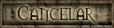
<style>
.page{position:relative;width:114px;height:28px}
.page>*{position:absolute;margin:0}
.t1{font:19px "Morpheus"}
</style>
<div class="page">
<p class="t1" style="left:17px;top:6px;width:82px;height:17px">Cancelar</p>
</div>
